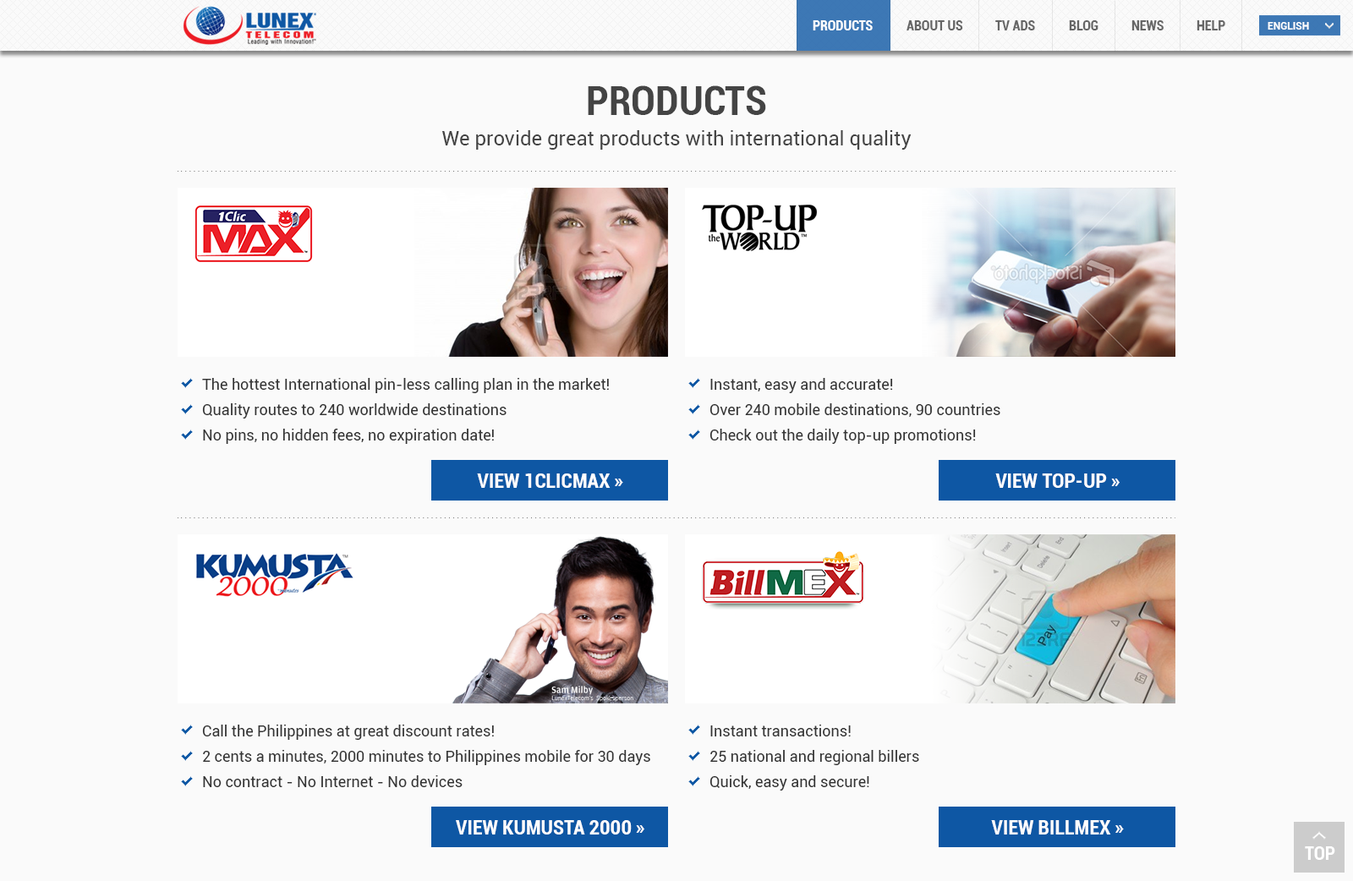
<style>
.page{position:relative;width:1353px;height:881px;background:#fafafa}
.page>*{position:absolute;margin:0}
.t1{font:13.5px "Roboto-BoldCondensed";color:#ffffff}
.t2{font:13.5px "Roboto-BoldCondensed";color:#666666}
.t3{font:10.1px "Roboto-Bold";color:#ffffff}
.t4{font:40.6px "Roboto-BoldCondensed";color:#444444}
.t5{font:20.3px "Roboto-Regular";color:#444444}
.t6{font:15.2px/25.4px "Roboto-Regular";color:#333333}
.t7{font:20.3px "Roboto-BoldCondensed";color:#fefefe}
.t8{font:18.6px "Roboto-BoldCondensed";color:#ffffff}
</style>
<div class="page">
<p class="t1" style="left:813px;top:20px;width:60px;height:10px">PRODUCTS</p>
<p class="t2" style="left:907px;top:20px;width:56px;height:10px">ABOUT US</p>
<p class="t2" style="left:995px;top:20px;width:40px;height:10px">TV ADS</p>
<p class="t2" style="left:1069px;top:20px;width:30px;height:10px">BLOG</p>
<p class="t2" style="left:1132px;top:20px;width:32px;height:10px">NEWS</p>
<p class="t2" style="left:1197px;top:20px;width:28px;height:10px">HELP</p>
<p class="t3" style="left:1268px;top:22px;width:41px;height:8px">ENGLISH</p>
<p class="t4" style="left:588px;top:85px;width:178px;height:30px">PRODUCTS</p>
<p class="t5" style="left:442px;top:130px;width:470px;height:20px">We provide great products with international quality</p>
<p class="t6" style="left:202px;top:378px;width:407px;height:66px">The hottest International pin-less calling plan in the market!<br>Quality routes to 240 worldwide destinations<br>No pins, no hidden fees, no expiration date!</p>
<p class="t6" style="left:710px;top:378px;width:290px;height:66px">Instant, easy and accurate!<br>Over 240 mobile destinations, 90 countries<br>Check out the daily top-up promotions!</p>
<p class="t7" style="left:477px;top:474px;width:146px;height:14px">VIEW 1CLICMAX »</p>
<p class="t7" style="left:995px;top:474px;width:125px;height:14px">VIEW TOP-UP »</p>
<p class="t6" style="left:202px;top:725px;width:448px;height:62px">Call the Philippines at great discount rates!<br>2 cents a minutes, 2000 minutes to Philippines mobile for 30 days<br>No contract - No Internet - No devices</p>
<p class="t6" style="left:710px;top:725px;width:209px;height:66px">Instant transactions!<br>25 national and regional billers<br>Quick, easy and secure!</p>
<p class="t7" style="left:456px;top:820px;width:188px;height:15px">VIEW KUMUSTA 2000 »</p>
<p class="t7" style="left:991px;top:820px;width:133px;height:15px">VIEW BILLMEX »</p>
<p class="t8" style="left:1305px;top:847px;width:30px;height:13px">TOP</p>
</div>
